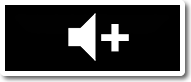
<style>
.page{position:relative;width:191px;height:82px;background:#000000}
.page>*{position:absolute;margin:0}
.t1{font:55px "Arial-BoldMT";color:#ffffff}
</style>
<div class="page">
<p class="t1" style="left:101px;top:24px;width:28px;height:28px">+</p>
</div>
